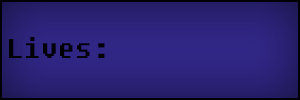
<style>
.page{position:relative;width:300px;height:100px}
.page>*{position:absolute;margin:0}
.t1{font:27px "Fixedsys";color:#010101}
</style>
<div class="page">
<p class="t1" style="left:9px;top:37px;width:96px;height:21px">Lives:</p>
</div>
